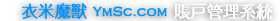
<style>
.page{position:relative;width:280px;height:21px}
.page>*{position:absolute;margin:0}
.t1{font:16px "¾­µä·±Ô²ÐÂ Regular";color:#0094ff;font-weight:bold}
.t2{font:13.3px "CopperplateGothic-Light";color:#0093fd;font-weight:bold}
.t3{font:12px "¾­µä·±Ô²ÐÂ Regular";color:#fefefe;font-weight:bold}
</style>
<div class="page">
<p class="t1" style="left:22px;top:3px;width:65px;height:16px">衣米魔兽</p>
<p class="t2" style="left:92px;top:6px;width:75px;height:11px">YmSc.com</p>
<p class="t3" style="left:174px;top:3px;width:99px;height:17px">账户管理系统</p>
</div>
